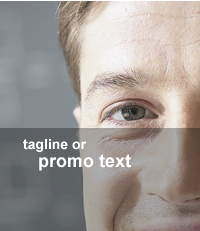
<style>
.page{position:relative;width:200px;height:231px}
.page>*{position:absolute;margin:0}
.t1{font:14px/18px "Arial-BoldMT";color:#ffffff}
.t2{font:18px/18px "Arial-BoldMT";color:#ffffff}
</style>
<div class="page">
<p class="t1" style="left:23px;top:139px;width:108px;height:32px">tagline or <br><span class="t2">   promo text</span></p>
</div>
